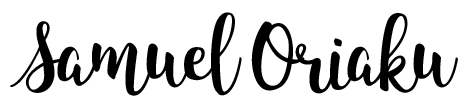
<style>
.page{position:relative;width:468px;height:106px;background:#ffffff}
.page>*{position:absolute;margin:0}
.t1{font:73.5px "KingBasilLite-Regular";letter-spacing:-0.06em;color:#000000}
</style>
<div class="page">
<p class="t1" style="left:10px;top:12px;width:448px;height:84px">Samuel Oriaku</p>
</div>
